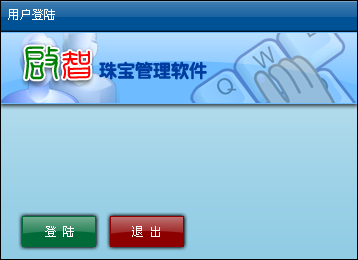
<style>
.page{position:relative;width:358px;height:260px}
.page>*{position:absolute;margin:0}
.t1{font:12px "SimSun";color:#ffffff}
.t2{font:36px "¾­µä·±Ó¡×­ Regular";letter-spacing:0.05em;color:#008103}
.t3{font:30px "¾­µä·±Ó¡×­ Regular";letter-spacing:0.05em;color:#ff0000}
.t4{font:18px "YentiEG-Ultra-GB";color:#003ca0}
</style>
<div class="page">
<p class="t1" style="left:8px;top:9px;width:47px;height:11px">用户登陆</p>
<p class="t2" style="left:25px;top:46px;width:66px;height:34px">启<span class="t3">智</span></p>
<p class="t4" style="left:99px;top:61px;width:108px;height:19px">珠宝管理软件</p>
<p class="t1" style="left:45px;top:226px;width:29px;height:11px">登 陆</p>
<p class="t1" style="left:132px;top:226px;width:28px;height:11px">退 出</p>
</div>
